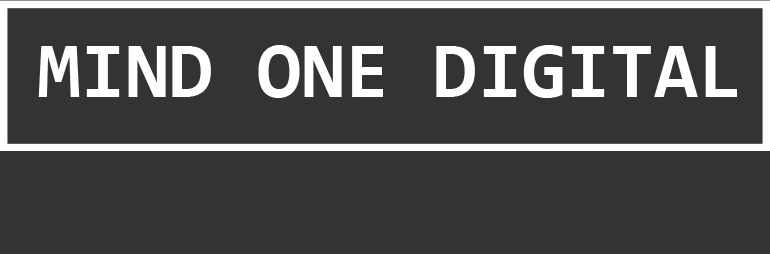
<style>
.page{position:relative;width:770px;height:254px;background:#333333}
.page>*{position:absolute;margin:0}
.t1{font:80px "Consolas-Bold";letter-spacing:0.001em;color:#ffffff}
</style>
<div class="page">
<p class="t1" style="left:38px;top:45px;width:699px;height:53px">MIND ONE DIGITAL</p>
</div>
